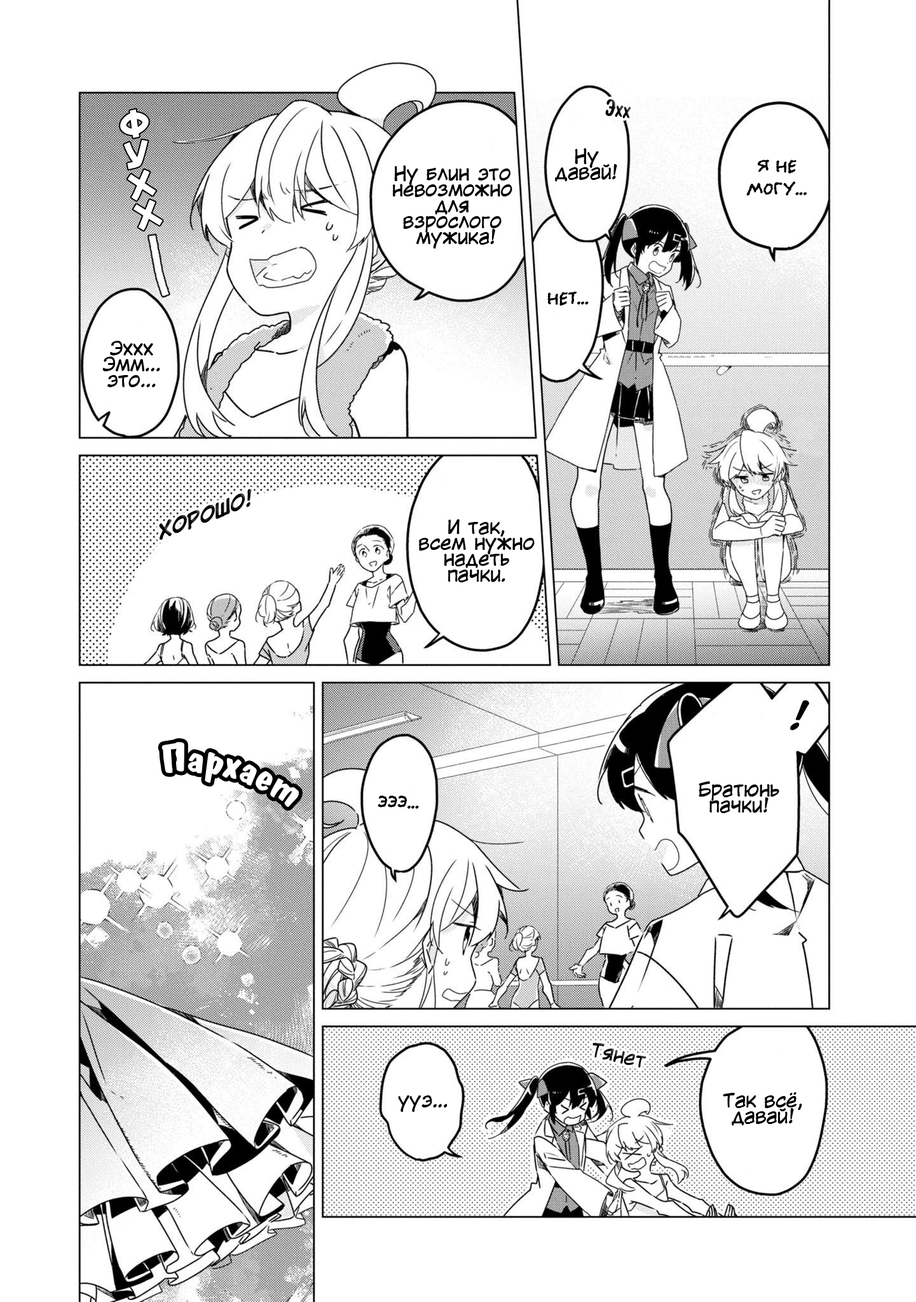
<style>
.page{position:relative;width:916px;height:1302px;background:#ffffff}
.page>*{position:absolute;margin:0}
.t1{font:22.9px "ADomIno";color:#000000}
.t2{font:30.5px/30.5px "Mauryssel-Bold";color:#ffffff}
.t3{font:19.1px/15.9px "KuraiVoice2";color:#000000}
.t4{font:19.1px "el_CCEvilSchemes";color:#000000}
.t5{font:19.1px "KuraiVoice2-BoldItalic";color:#000000}
.t6{font:35px "KuraiVoice2-BoldItalic";color:#000000}
.t7{font:19.1px "KuraiVoice2";color:#000000}
</style>
<div class="page">
<p class="t1" style="left:605px;top:99px;width:26px;height:19px;rotate:7deg">Эхх</p>
<p class="t2" style="left:120px;top:109px;width:43px;height:122px;text-align:center;rotate:-9deg">Ф<br>У<br>Х<br>Х</p>
<p class="t3" style="left:555px;top:148px;width:62px;height:34px;text-align:center">Ну<br>давай!</p>
<p class="t4" style="left:746px;top:160px;width:61px;height:36px;text-align:center">Я не<br>могу...</p>
<p class="t3" style="left:392px;top:165px;width:120px;height:84px;text-align:center">Ну блин это <br>невозможно <br>для <br>взрослого <br>мужика!</p>
<p class="t4" style="left:547px;top:291px;width:42px;height:15px">Нет...</p>
<p class="t3" style="left:102px;top:341px;width:58px;height:46px;text-align:center">Эххх<br>Эмм...<br>это...</p>
<p class="t5" style="left:159px;top:489px;width:93px;height:51px;rotate:-21deg">ХОРОШО!</p>
<p class="t3" style="left:419px;top:519px;width:116px;height:63px;text-align:center">И так,<br>всем нужно<br>надеть<br>пачки.</p>
<p class="t6" style="left:790px;top:700px;width:19px;height:30px">!</p>
<p class="t3" style="left:699px;top:781px;width:80px;height:32px;text-align:center">Братюнь<br>пачки!</p>
<p class="t4" style="left:378px;top:795px;width:41px;height:14px">Эээ...</p>
<p class="t7" style="left:592px;top:1042px;width:54px;height:26px;rotate:13deg">Тянет</p>
<p class="t7" style="left:398px;top:1095px;width:49px;height:17px">ууэ...</p>
<p class="t3" style="left:723px;top:1092px;width:79px;height:34px;text-align:center">Так всё,<br>давай!</p>
</div>
